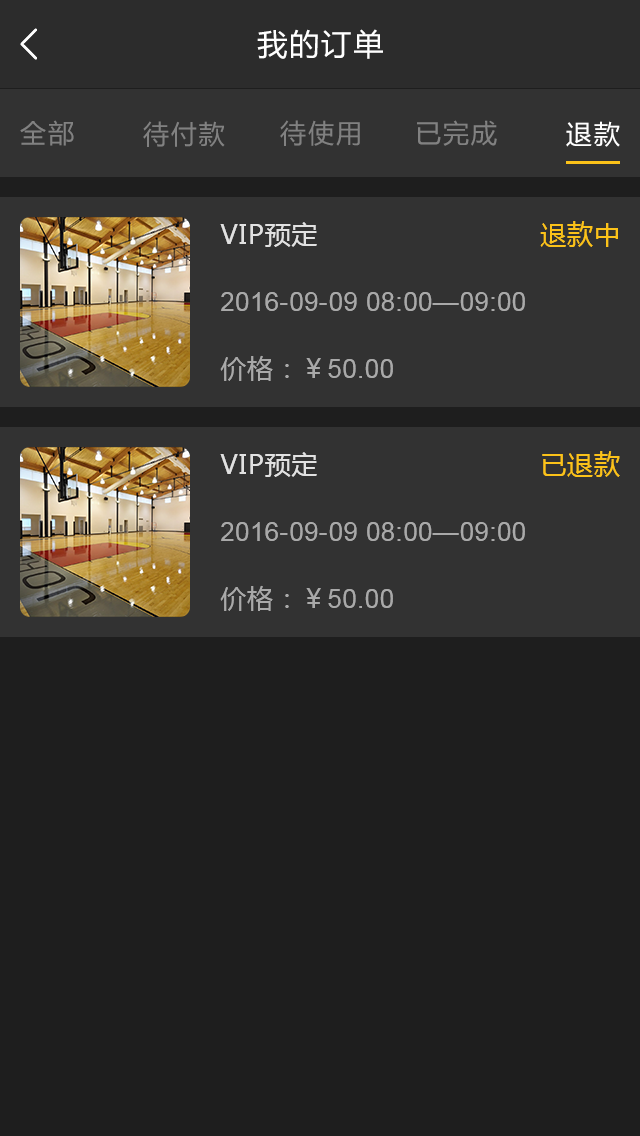
<style>
.page{position:relative;width:640px;height:1136px;background:#1e1e1e}
.page>*{position:absolute;margin:0}
.t1{font:30px "MicrosoftYaHei";letter-spacing:0.07em;color:#ffffff}
.t2{font:26px "MicrosoftYaHei";letter-spacing:0.07em;color:#818181}
.t3{font:26px "MicrosoftYaHei";letter-spacing:0.07em;color:#ffffff}
.t4{font:26px "MicrosoftYaHei";letter-spacing:0.03em;color:#e1e1e1}
.t5{font:26px "MicrosoftYaHei";letter-spacing:0.03em;color:#fbc219}
.t6{font:26px "ArialMT";letter-spacing:0.03em;color:#a9a9a9}
.t7{font:26px "MicrosoftYaHei";letter-spacing:0.03em;color:#a9a9a9}
</style>
<div class="page">
<p class="t1" style="left:257px;top:29px;width:126px;height:30px">我的订单</p>
<p class="t2" style="left:20px;top:120px;width:54px;height:26px">全部</p>
<p class="t2" style="left:143px;top:121px;width:82px;height:26px">待付款</p>
<p class="t2" style="left:280px;top:120px;width:80px;height:26px">待使用</p>
<p class="t2" style="left:417px;top:120px;width:80px;height:26px">已完成</p>
<p class="t3" style="left:566px;top:121px;width:54px;height:26px">退款</p>
<p class="t4" style="left:220px;top:222px;width:97px;height:25px">VIP预定</p>
<p class="t5" style="left:540px;top:221px;width:78px;height:26px">退款中</p>
<p class="t6" style="left:221px;top:292px;width:304px;height:19px">2016-09-09 08:00—09:00</p>
<p class="t6" style="left:220px;top:355px;width:173px;height:26px"><span class="t7">价格：￥</span>50.00</p>
<p class="t4" style="left:220px;top:452px;width:97px;height:25px">VIP预定</p>
<p class="t5" style="left:542px;top:451px;width:78px;height:26px">已退款</p>
<p class="t6" style="left:221px;top:522px;width:304px;height:19px">2016-09-09 08:00—09:00</p>
<p class="t6" style="left:220px;top:585px;width:173px;height:26px"><span class="t7">价格：￥</span>50.00</p>
</div>
